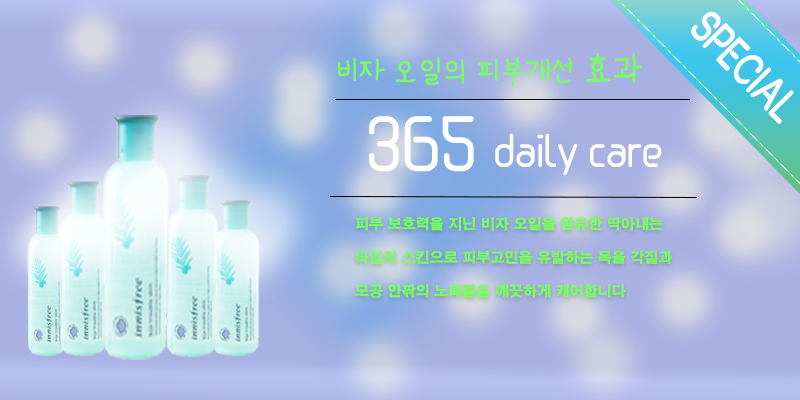
<style>
.page{position:relative;width:800px;height:400px}
.page>*{position:absolute;margin:0}
.t1{font:35.8px "HSGaeulsenggak";color:#ffffff;scale:0.85 1}
.t2{font:26.9px "HSGaeulsenggak";color:#ffffff;scale:0.85 1}
.t3{font:30px "Dovemayo-Medium";color:#78ff5d}
.t4{font:36px "Dovemayo-Medium";color:#78ff5d}
.t5{font:36px "HSGaeulsenggak-Thin";color:#ffffff}
.t6{font:60px "HSGaeulsenggak-Thin";color:#ffffff}
.t7{font:14px "H2gtrE";color:#78ff5d}
.t8{font:14px "Gulim";color:#78ff5d}
</style>
<div class="page">
<p class="t1" style="left:691px;top:11px;width:103px;height:113px;rotate:46deg"><span class="t2">   </span>SPECIAL</p>
<p class="t3" style="left:338px;top:53px;width:304px;height:34px">비자 오일의 피부개선 <span class="t4">효과</span></p>
<p class="t5" style="left:369px;top:116px;width:293px;height:59px"><span class="t6">365 </span>daily care</p>
<p class="t7" style="left:355px;top:217px;width:317px;height:81px">피부 보호력을 지닌 비자 오일을 함유한 딱아내는<br><br>타입의 스킨으로 피부고민을 유발하는 목을 각질과<br><br>모공 안팎의 노폐물을 깨끗하게 캐어합니다<span class="t8">.</span></p>
</div>
